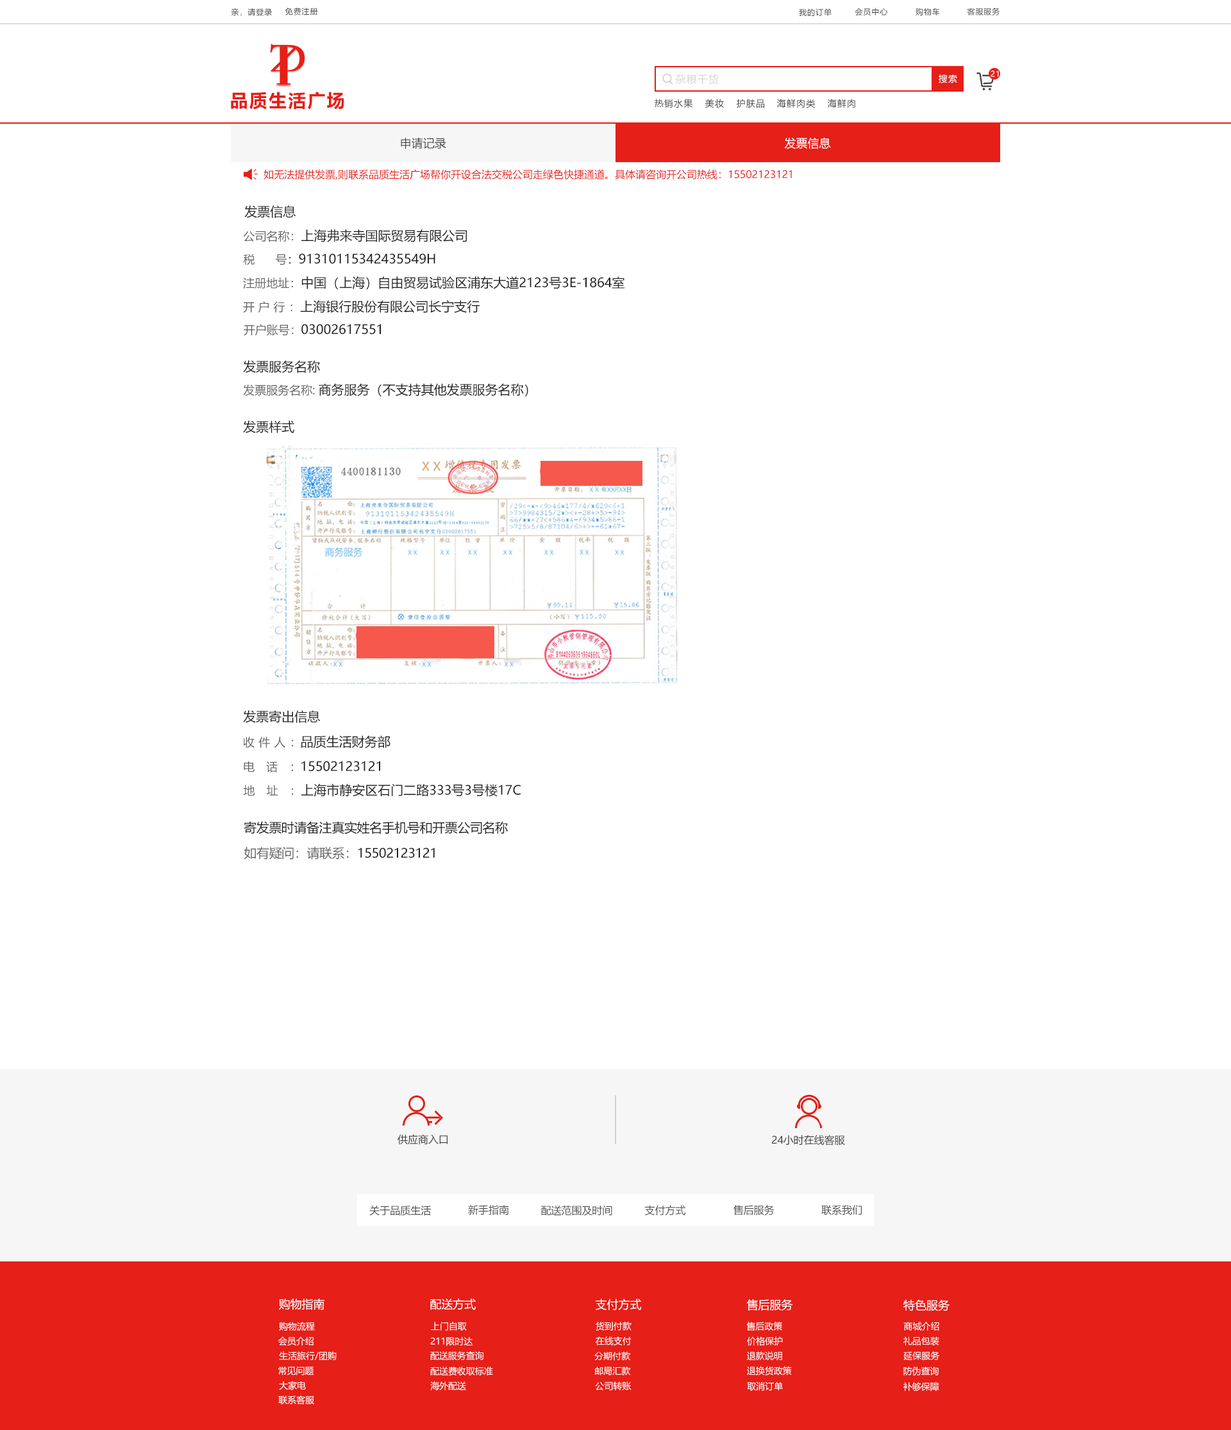
<style>
.page{position:relative;width:1231px;height:1430px;background:#ffffff}
.page>*{position:absolute;margin:0}
.t1{font:7.7px "MicrosoftYaHei";letter-spacing:0.08em;color:#404040}
.t2{font:10.3px "MicrosoftYaHei";letter-spacing:0.08em;color:#d6d6d6}
.t3{font:9px "MicrosoftYaHei";letter-spacing:0.08em;color:#ffffff}
.t4{font:7.7px "MicrosoftYaHei";letter-spacing:0.08em;color:#ffffff}
.t5{font:17.9px "MicrosoftYaHei-Bold";letter-spacing:0.08em;color:#e61f18}
.t6{font:9px "MicrosoftYaHei";letter-spacing:0.08em;color:#404040}
.t7{font:11.5px "MicrosoftYaHei";color:#404040}
.t8{font:11.5px "MicrosoftYaHei";color:#ffffff}
.t9{font:10.3px "MicrosoftYaHei";color:#e61f18}
.t10{font:12.8px "MicrosoftYaHei";color:#202020;text-transform:uppercase}
.t11{font:11.5px "MicrosoftYaHei";color:#666666;text-transform:uppercase}
.t12{font:11.5px "MicrosoftYaHei";color:#202020;text-transform:uppercase}
.t13{font:11.5px "MicrosoftYaHei";letter-spacing:0.32em;color:#666666;text-transform:uppercase}
.t14{font:11.5px "MicrosoftYaHei";letter-spacing:-0.02em;color:#666666;text-transform:uppercase}
.t15{font:11.5px "MicrosoftYaHei";letter-spacing:0.34em;color:#666666;text-transform:uppercase}
.t16{font:11.5px "MicrosoftYaHei";letter-spacing:-0.04em;color:#666666;text-transform:uppercase}
.t17{font:11.5px "MicrosoftYaHei";letter-spacing:1em;color:#666666;text-transform:uppercase}
.t18{font:11.5px "MicrosoftYaHei";letter-spacing:-0.06em;color:#666666;text-transform:uppercase}
.t19{font:12.8px "MicrosoftYaHei";letter-spacing:-0.02em;color:#202020;text-transform:uppercase}
.t20{font:12.8px "MicrosoftYaHei";letter-spacing:-0.02em;color:#666666;text-transform:uppercase}
.t21{font:10.3px "MicrosoftYaHei";color:#404040}
.t22{font:10.3px "MicrosoftYaHei";color:#505050}
.t23{font:9px "MicrosoftYaHei";color:#ffffff}
</style>
<div class="page">
<p class="t1" style="left:231px;top:8px;width:41px;height:8px">亲，请登录</p>
<p class="t1" style="left:285px;top:8px;width:33px;height:7px">免费注册</p>
<p class="t1" style="left:799px;top:8px;width:32px;height:8px">我的订单</p>
<p class="t1" style="left:854px;top:8px;width:34px;height:8px">会员中心</p>
<p class="t1" style="left:915px;top:8px;width:25px;height:8px">购物车</p>
<p class="t1" style="left:967px;top:8px;width:33px;height:7px">客服服务</p>
<p class="t2" style="left:675px;top:74px;width:44px;height:11px">杂粮干货</p>
<p class="t3" style="left:938px;top:74px;width:19px;height:9px">搜索</p>
<p class="t4" style="left:990px;top:71px;width:9px;height:6px">21</p>
<p class="t5" style="left:231px;top:92px;width:113px;height:18px">品质生活广场</p>
<p class="t6" style="left:654px;top:99px;width:39px;height:9px">热销水果</p>
<p class="t6" style="left:705px;top:99px;width:19px;height:9px">美妆</p>
<p class="t6" style="left:737px;top:99px;width:27px;height:9px">护肤品</p>
<p class="t6" style="left:776px;top:99px;width:39px;height:9px">海鲜肉类</p>
<p class="t6" style="left:827px;top:99px;width:28px;height:9px">海鲜肉</p>
<p class="t7" style="left:401px;top:137px;width:45px;height:12px">申请记录</p>
<p class="t8" style="left:784px;top:137px;width:47px;height:12px">发票信息</p>
<p class="t9" style="left:263px;top:169px;width:529px;height:10px">如无法提供发票,则联系品质生活广场帮你开设合法交税公司走绿色快捷通道。具体请咨询开公司热线：15502123121</p>
<p class="t10" style="left:244px;top:205px;width:52px;height:13px">发票信息</p>
<p class="t10" style="left:243px;top:229px;width:224px;height:13px"><span class="t11">公司名称：</span>上海弗来寺国际贸易有限公司</p>
<p class="t10" style="left:243px;top:253px;width:192px;height:12px"><span class="t11">税      号</span><span class="t12">：</span>91310115342435549H</p>
<p class="t10" style="left:243px;top:276px;width:382px;height:14px"><span class="t11">注册地址：</span>中国（上海）自由贸易试验区浦东大道2123号3E-1864室</p>
<p class="t10" style="left:243px;top:300px;width:236px;height:13px"><span class="t13">开户行</span><span class="t11">：</span>上海银行股份有限公司长宁支行</p>
<p class="t10" style="left:244px;top:324px;width:137px;height:12px"><span class="t11">开户账号</span><span class="t14">：</span>03002617551</p>
<p class="t10" style="left:243px;top:360px;width:77px;height:13px">发票服务名称</p>
<p class="t10" style="left:243px;top:383px;width:285px;height:14px"><span class="t11">发票服务名称: </span>商务服务（不支持其他发票服务名称）</p>
<p class="t10" style="left:243px;top:421px;width:51px;height:12px">发票样式</p>
<p class="t10" style="left:243px;top:710px;width:78px;height:13px">发票寄出信息</p>
<p class="t10" style="left:243px;top:735px;width:147px;height:13px"><span class="t15">收件人</span><span class="t16">：</span>品质生活财务部</p>
<p class="t10" style="left:244px;top:761px;width:136px;height:11px"><span class="t17">电话</span><span class="t18">：</span>15502123121</p>
<p class="t10" style="left:243px;top:783px;width:278px;height:14px"><span class="t17">地址</span><span class="t14">：</span>上海市静安区石门二路333号3号楼17C</p>
<p class="t19" style="left:244px;top:821px;width:264px;height:13px">寄发票时请备注真实姓名手机号和开票公司名称</p>
<p class="t19" style="left:244px;top:847px;width:191px;height:13px"><span class="t20">如有疑问：请联系：</span>15502123121</p>
<p class="t21" style="left:397px;top:1134px;width:50px;height:11px">供应商入口</p>
<p class="t21" style="left:772px;top:1135px;width:73px;height:10px">24小时在线客服</p>
<p class="t22" style="left:369px;top:1205px;width:62px;height:11px">关于品质生活</p>
<p class="t22" style="left:468px;top:1204px;width:41px;height:11px">新手指南</p>
<p class="t22" style="left:541px;top:1205px;width:71px;height:11px">配送范围及时间</p>
<p class="t22" style="left:644px;top:1205px;width:42px;height:10px">支付方式</p>
<p class="t22" style="left:733px;top:1205px;width:41px;height:10px">售后服务</p>
<p class="t22" style="left:821px;top:1205px;width:41px;height:10px">联系我们</p>
<p class="t8" style="left:279px;top:1299px;width:45px;height:11px">购物指南</p>
<p class="t8" style="left:430px;top:1299px;width:46px;height:11px">配送方式</p>
<p class="t8" style="left:596px;top:1299px;width:46px;height:11px">支付方式</p>
<p class="t8" style="left:746px;top:1299px;width:47px;height:12px">售后服务</p>
<p class="t8" style="left:903px;top:1299px;width:46px;height:13px">特色服务</p>
<p class="t23" style="left:279px;top:1322px;width:36px;height:9px">购物流程</p>
<p class="t23" style="left:431px;top:1322px;width:36px;height:9px">上门自取</p>
<p class="t23" style="left:596px;top:1322px;width:35px;height:9px">货到付款</p>
<p class="t23" style="left:746px;top:1322px;width:36px;height:9px">售后政策</p>
<p class="t23" style="left:903px;top:1322px;width:36px;height:9px">商城介绍</p>
<p class="t23" style="left:278px;top:1337px;width:35px;height:9px">会员介绍</p>
<p class="t23" style="left:430px;top:1337px;width:43px;height:9px">211限时达</p>
<p class="t23" style="left:596px;top:1337px;width:35px;height:8px">在线支付</p>
<p class="t23" style="left:747px;top:1337px;width:36px;height:9px">价格保护</p>
<p class="t23" style="left:903px;top:1337px;width:36px;height:8px">礼品包装</p>
<p class="t23" style="left:279px;top:1351px;width:58px;height:9px">生活旅行/团购</p>
<p class="t23" style="left:430px;top:1351px;width:53px;height:9px">配送服务查询</p>
<p class="t23" style="left:594px;top:1351px;width:36px;height:10px">分期付款</p>
<p class="t23" style="left:747px;top:1351px;width:35px;height:10px">退款说明</p>
<p class="t23" style="left:903px;top:1351px;width:37px;height:9px">延保服务</p>
<p class="t23" style="left:278px;top:1367px;width:36px;height:9px">常见问题</p>
<p class="t23" style="left:430px;top:1367px;width:63px;height:9px">配送费收取标准</p>
<p class="t23" style="left:595px;top:1367px;width:35px;height:9px">邮局汇款</p>
<p class="t23" style="left:747px;top:1366px;width:45px;height:10px">退换货政策</p>
<p class="t23" style="left:903px;top:1367px;width:35px;height:9px">防伪查询</p>
<p class="t23" style="left:279px;top:1381px;width:27px;height:9px">大家电</p>
<p class="t23" style="left:430px;top:1381px;width:36px;height:9px">海外配送</p>
<p class="t23" style="left:595px;top:1381px;width:36px;height:10px">公司转账</p>
<p class="t23" style="left:747px;top:1382px;width:36px;height:9px">取消订单</p>
<p class="t23" style="left:903px;top:1382px;width:36px;height:10px">补够保障</p>
<p class="t23" style="left:278px;top:1395px;width:36px;height:9px">联系客服</p>
</div>
